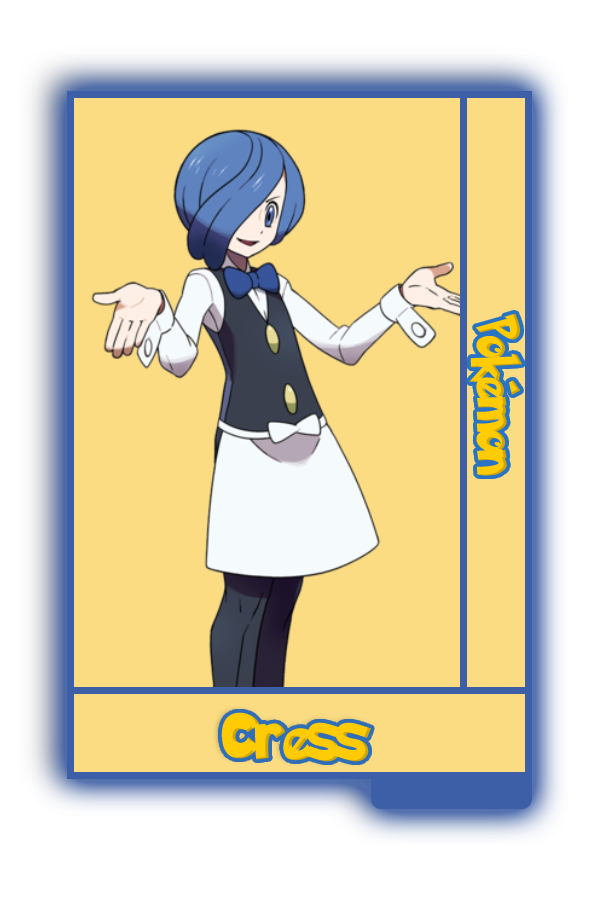
<style>
.page{position:relative;width:600px;height:900px;background:#fbdc83}
.page>*{position:absolute;margin:0}
.t1{font:48.8px "PokemonSolidNormal";color:#ffcb05;scale:0.8 1}
.t2{font:56.6px "PokemonSolidNormal";color:#ffcb05;scale:0.92 1}
</style>
<div class="page">
<p class="t1" style="left:469px;top:313px;width:54px;height:163px;rotate:90deg">Pokémon</p>
<p class="t2" style="left:221px;top:712px;width:150px;height:50px">Cress</p>
</div>
